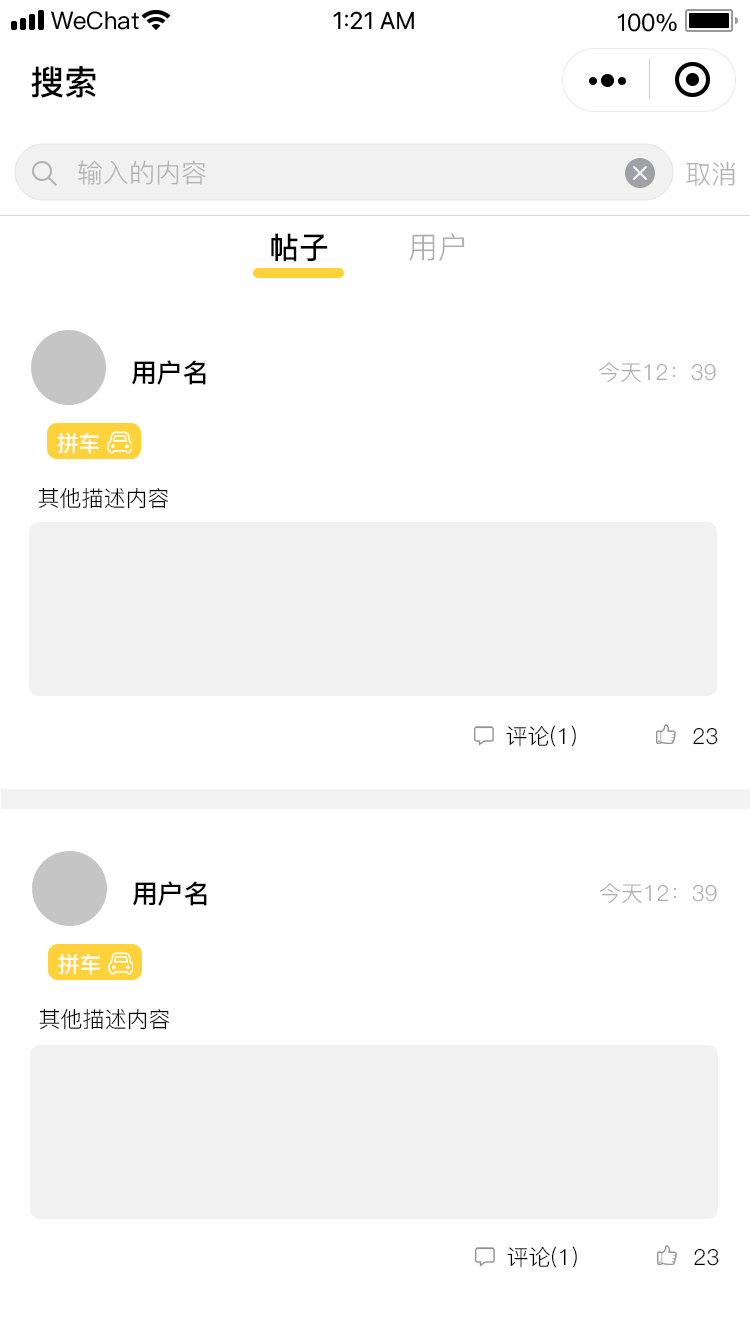
<style>
.page{position:relative;width:750px;height:1334px;background:#ffffff}
.page>*{position:absolute;margin:0}
.t1{font:34px "PingFang-SC-Bold";color:#000000}
.t2{font:26px "PingFangSC-Regular";color:#b2b2b2}
.t3{font:30px "PingFang-SC-Bold";color:#000000}
.t4{font:30px "PingFang-SC-Regular";color:#adadad}
.t5{font:26px "PingFang-SC-Bold";color:#000000}
.t6{font:22px "PingFang-SC-Regular";color:#adadad}
.t7{font:22px "PingFang-SC-Bold";color:#ffffff}
.t8{font:22px "PingFang-SC-Regular";color:#000000}
</style>
<div class="page">
<p class="t1" style="left:31px;top:66px;width:65px;height:32px">搜索</p>
<p class="t2" style="left:78px;top:160px;width:128px;height:25px">输入的内容</p>
<p class="t2" style="left:686px;top:161px;width:49px;height:25px">取消</p>
<p class="t3" style="left:271px;top:233px;width:57px;height:29px">帖子</p>
<p class="t4" style="left:409px;top:233px;width:56px;height:28px">用户</p>
<p class="t5" style="left:132px;top:360px;width:74px;height:25px">用户名</p>
<p class="t6" style="left:599px;top:362px;width:117px;height:21px">今天12：39</p>
<p class="t7" style="left:57px;top:432px;width:42px;height:22px">拼车</p>
<p class="t8" style="left:38px;top:487px;width:131px;height:22px">其他描述内容</p>
<p class="t8" style="left:506px;top:725px;width:70px;height:22px">评论(1)</p>
<p class="t8" style="left:693px;top:727px;width:25px;height:18px">23</p>
<p class="t5" style="left:133px;top:881px;width:74px;height:25px">用户名</p>
<p class="t6" style="left:600px;top:883px;width:117px;height:21px">今天12：39</p>
<p class="t7" style="left:58px;top:953px;width:42px;height:22px">拼车</p>
<p class="t8" style="left:39px;top:1008px;width:131px;height:22px">其他描述内容</p>
<p class="t8" style="left:507px;top:1246px;width:70px;height:22px">评论(1)</p>
<p class="t8" style="left:694px;top:1248px;width:25px;height:18px">23</p>
</div>
